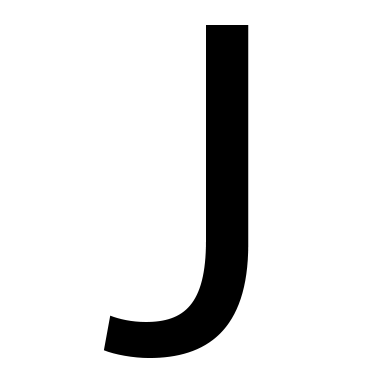
<style>
.page{position:relative;width:384px;height:384px;background:#ffffff}
.page>*{position:absolute;margin:0}
.t1{font:486.1px "MyriadPro-Regular";color:#000000}
</style>
<div class="page">
<p class="t1" style="left:103px;top:25px;width:146px;height:333px">J</p>
</div>
